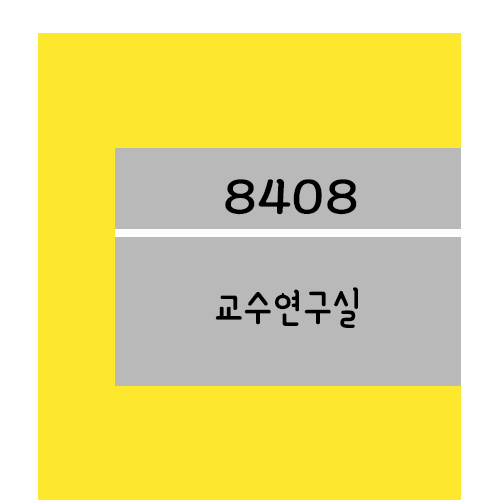
<style>
.page{position:relative;width:500px;height:500px;background:#fee82d}
.page>*{position:absolute;margin:0}
.t1{font:61.2px "YanoljaYacheR";color:#000000;scale:1.18 1}
.t2{font:48px "YanoljaYacheR";color:#000000}
</style>
<div class="page">
<p class="t1" style="left:225px;top:179px;width:132px;height:36px">8408</p>
<p class="t2" style="left:215px;top:287px;width:143px;height:41px">교수연구실</p>
</div>
